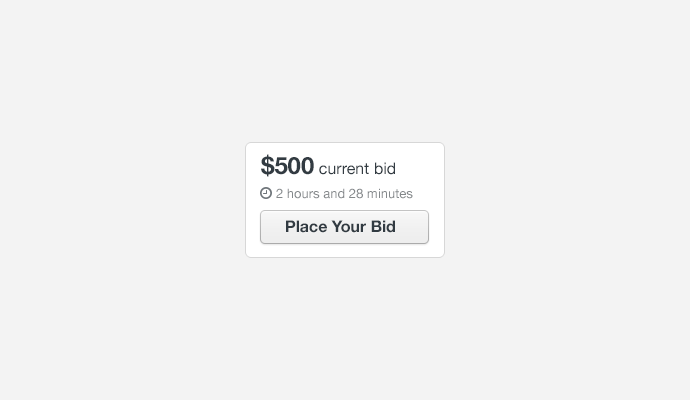
<style>
.page{position:relative;width:690px;height:400px;background:#f3f3f3}
.page>*{position:absolute;margin:0}
.t1{font:16px "HelveticaNeue";color:#323b42}
.t2{font:24px "HelveticaNeue-Bold";color:#323b42}
.t3{font:13px "HelveticaNeue";color:#84888b}
.t4{font:16px "HelveticaNeue-Bold";color:#323b42}
</style>
<div class="page">
<p class="t1" style="left:261px;top:154px;width:134px;height:23px"><span class="t2">$500 </span>current bid</p>
<p class="t3" style="left:276px;top:188px;width:137px;height:11px">2 hours and 28 minutes</p>
<p class="t4" style="left:286px;top:220px;width:109px;height:13px">Place Your Bid</p>
</div>
